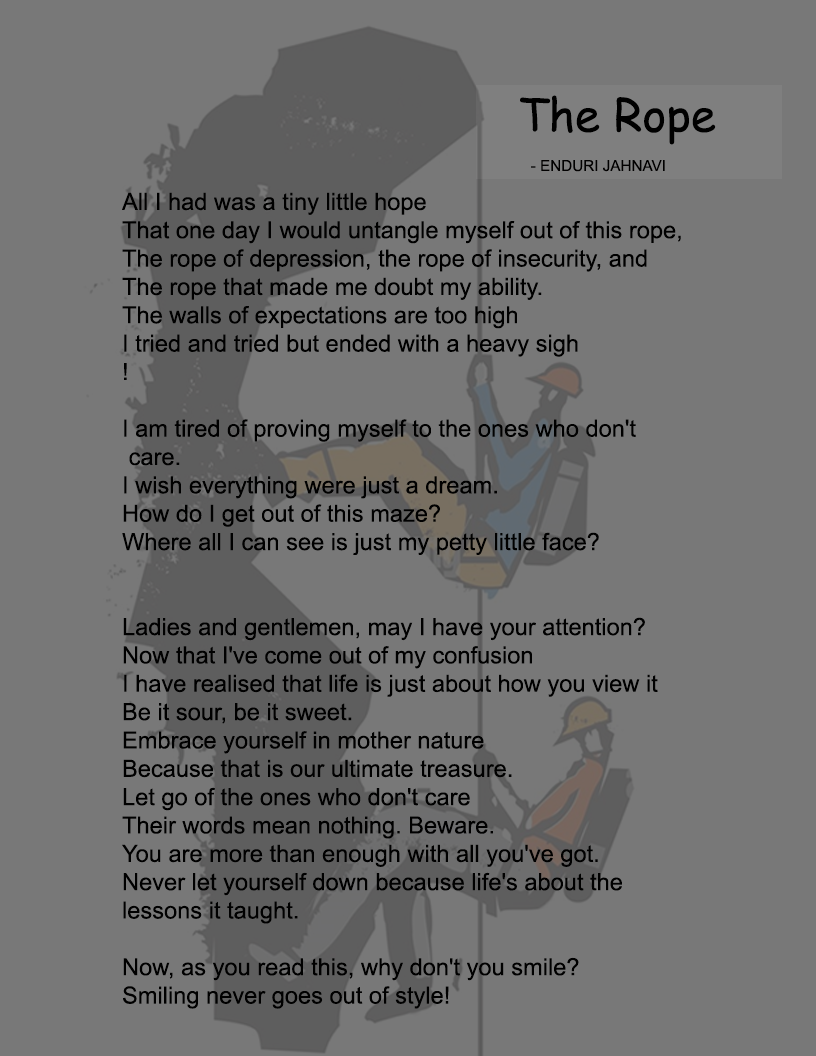
<style>
.page{position:relative;width:816px;height:1056px;background:#787878}
.page>*{position:absolute;margin:0}
.t1{font:45.7px "ComicSansMS";color:#000000}
.t2{font:15.2px "ArialMT";color:#010000}
.t3{font:23.6px "ArialMT";color:#000000}
</style>
<div class="page">
<p class="t1" style="left:520px;top:95px;width:196px;height:50px">The Rope</p>
<p class="t2" style="left:531px;top:160px;width:134px;height:12px">- ENDURI JAHNAVI</p>
<p class="t3" style="left:122px;top:192px;width:559px;height:817px">All I had was a tiny little hope <br>That one day I would untangle myself out of this rope,<br>The rope of depression, the rope of insecurity, and<br>The rope that made me doubt my ability.<br>The walls of expectations are too high<br>I tried and tried but ended with a heavy sigh<br>!<br><br>I am tired of proving myself to the ones who don't<br> care.<br>I wish everything were just a dream.<br>How do I get out of this maze?<br>Where all I can see is just my petty little face?<br><br><br>Ladies and gentlemen, may I have your attention?<br>Now that I've come out of my confusion <br>I have realised that life is just about how you view it<br>Be it sour, be it sweet.<br>Embrace yourself in mother nature <br>Because that is our ultimate treasure.<br>Let go of the ones who don't care<br>Their words mean nothing. Beware.<br>You are more than enough with all you've got.<br>Never let yourself down because life's about the <br>lessons it taught.<br><br>Now, as you read this, why don't you smile?<br>Smiling never goes out of style!</p>
</div>
